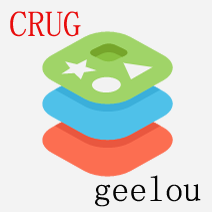
<style>
.page{position:relative;width:212px;height:212px;background:#f3f3f3}
.page>*{position:absolute;margin:0}
.t1{font:36px "SimSun";color:#e80d0d}
.t2{font:36px "SimSun";color:#050505}
</style>
<div class="page">
<p class="t1" style="left:10px;top:11px;width:71px;height:26px">CRUG</p>
<p class="t2" style="left:95px;top:175px;width:106px;height:32px">geelou</p>
</div>
